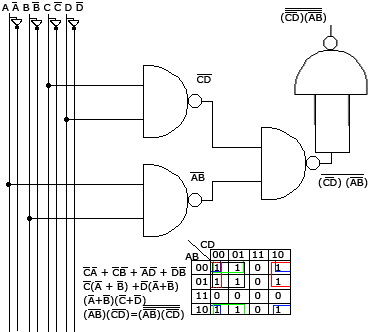
<style>
.page{position:relative;width:379px;height:332px;background:#ffffff}
.page>*{position:absolute;margin:0}
.t1{font:10px "Verdana";color:#000000}
.t2{font:10px/14px "Verdana";color:#000000}
</style>
<div class="page">
<p class="t1" style="left:2px;top:4px;width:81px;height:7px">A A B B C C D D</p>
<p class="t1" style="left:281px;top:13px;width:45px;height:10px">(CD)(AB)</p>
<p class="t1" style="left:197px;top:76px;width:14px;height:7px">CD</p>
<p class="t1" style="left:191px;top:174px;width:14px;height:7px">AB</p>
<p class="t1" style="left:318px;top:178px;width:50px;height:10px">(CD) (AB)</p>
<p class="t1" style="left:200px;top:241px;width:15px;height:7px">CD</p>
<p class="t1" style="left:185px;top:253px;width:14px;height:7px">AB</p>
<p class="t1" style="left:212px;top:251px;width:72px;height:7px">00  01  11  10</p>
<p class="t2" style="left:83px;top:269px;width:103px;height:51px">CA + CB + AD + DB<br>C(A + B) +D(A+B)<br>(A+B)(C+D)<br>(AB)(CD)=(AB)(CD)</p>
<p class="t2" style="left:196px;top:264px;width:12px;height:49px">00<br>01<br>11<br>10</p>
<p class="t2" style="left:214px;top:264px;width:67px;height:49px">1    1    0    1<br>1    1    0    1<br>0    0    0    0 <br>1    1    0    1</p>
</div>
